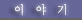
<style>
.page{position:relative;width:82px;height:20px;background:#666699}
.page>*{position:absolute;margin:0}
.t1{font:12px "BatangChe";color:#ffffff;scale:0.9 1}
</style>
<div class="page">
<p class="t1" style="left:15px;top:4px;width:51px;height:12px">이  야  기</p>
</div>
